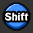
<style>
.page{position:relative;width:33px;height:33px;background:#333333}
.page>*{position:absolute;margin:0}
.t1{font:9px "M";color:#ffffff;scale:1.2 1}
</style>
<div class="page">
<p class="t1" style="left:5px;top:12px;width:24px;height:9px">Shift</p>
</div>
